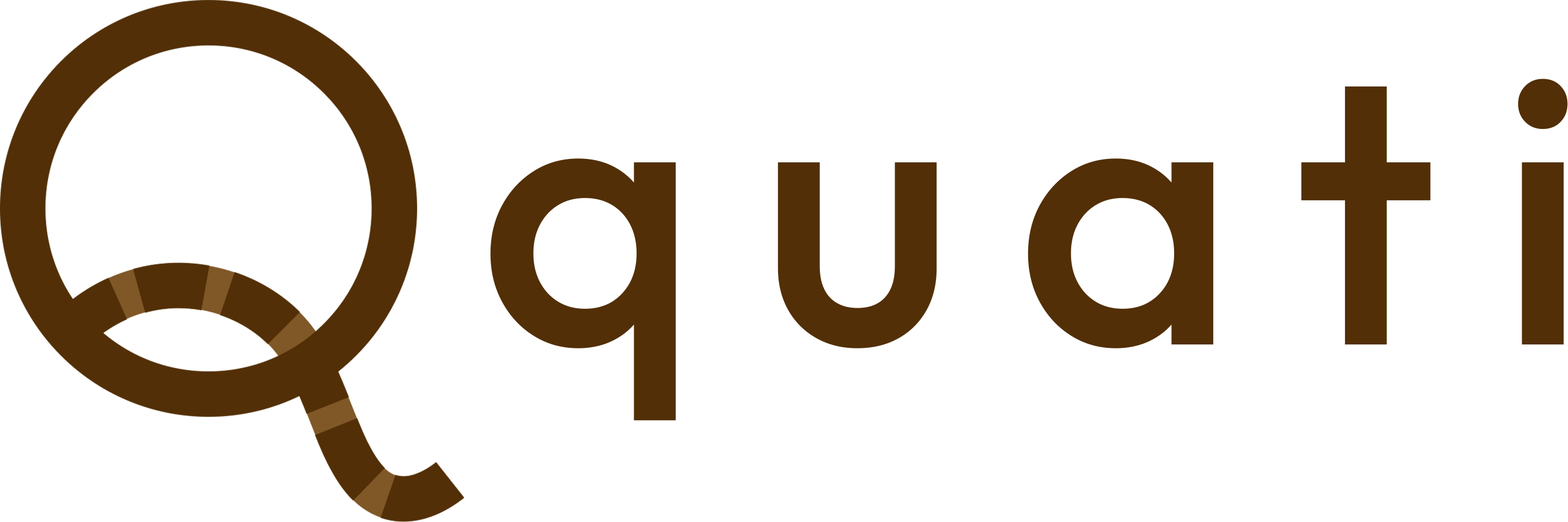
<style>
.page{position:relative;width:1568px;height:522px;background:#ffffff}
.page>*{position:absolute;margin:0}
.t1{font:379.5px "Outfit-Medium";letter-spacing:0.16em;color:#522f06}
</style>
<div class="page">
<p class="t1" style="left:490px;top:79px;width:1078px;height:342px">quati</p>
</div>
